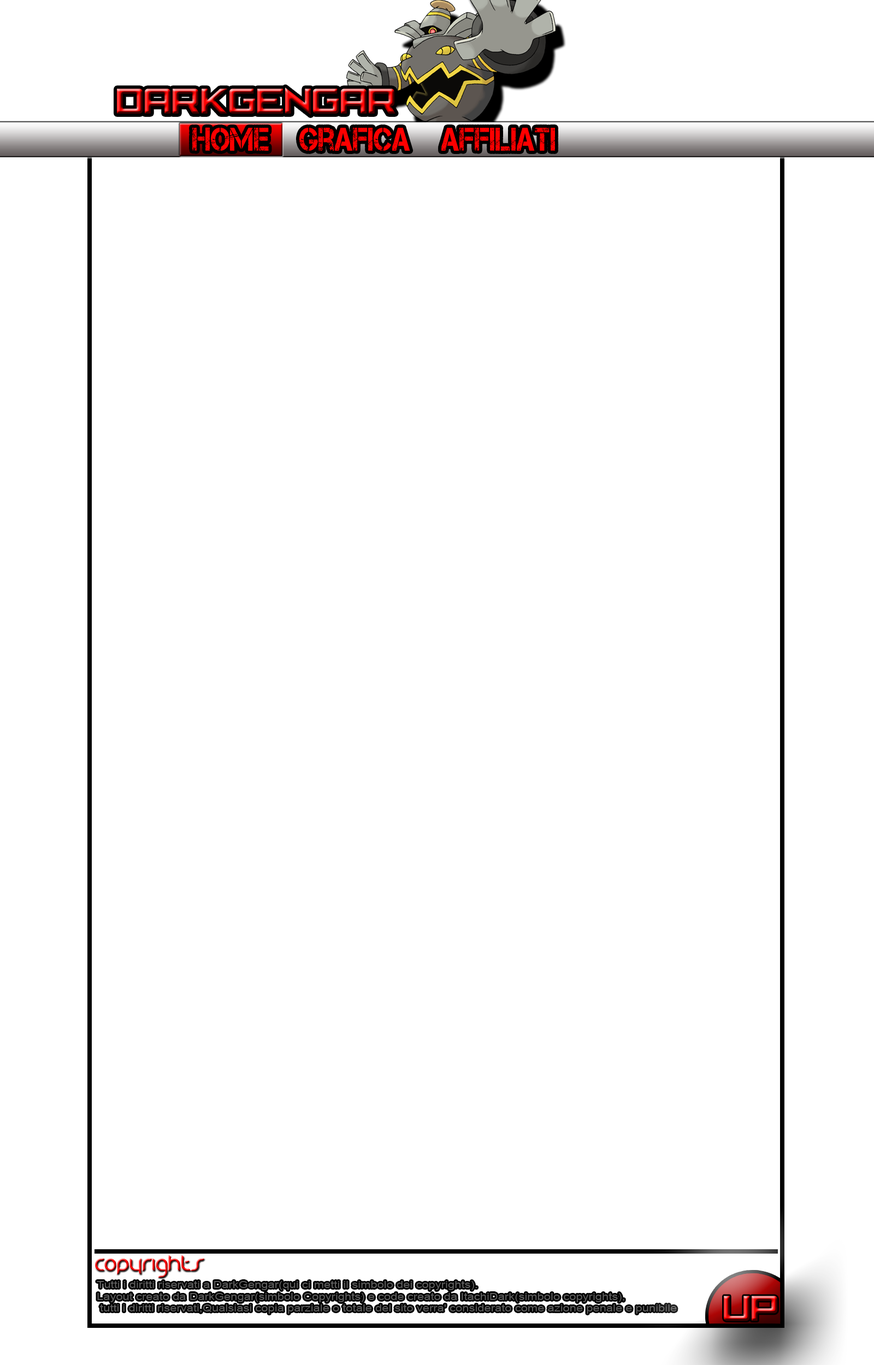
<style>
.page{position:relative;width:874px;height:1365px;background:#ffffff}
.page>*{position:absolute;margin:0}
.t1{font:32.8px "CafeNeroM54"}
.t2{font:32.8px "Captureit";color:#ff0000;scale:0.85 1}
.t3{font:15.8px "Danube";scale:0.91 1}
</style>
<div class="page">
<p class="t1" style="left:117px;top:87px;width:278px;height:28px">DarkGengar</p>
<p class="t2" style="left:192px;top:127px;width:77px;height:24px">Home</p>
<p class="t2" style="left:299px;top:128px;width:111px;height:23px">Grafica</p>
<p class="t2" style="left:441px;top:128px;width:114px;height:23px">Affiliati</p>
<p class="t3" style="left:95px;top:1255px;width:109px;height:23px">Copyrights</p>
<p class="t1" style="left:723px;top:1296px;width:54px;height:25px">Up</p>
</div>
